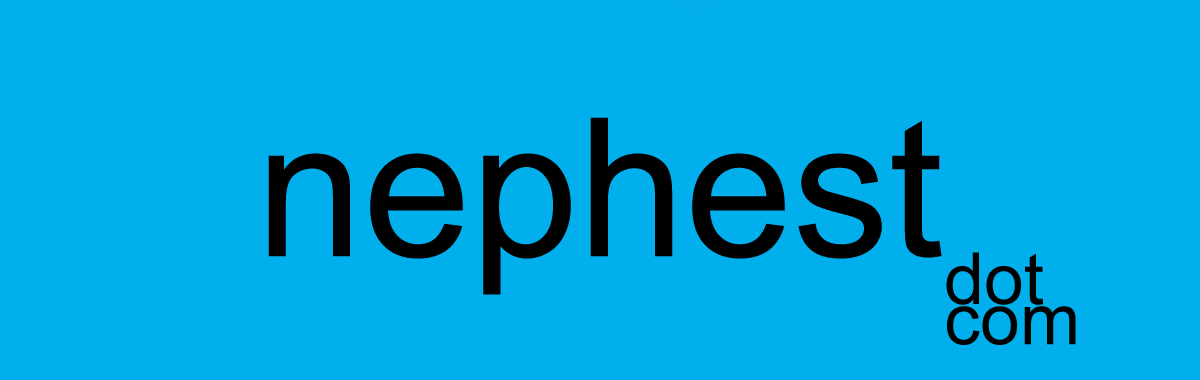
<style>
.page{position:relative;width:1200px;height:380px;background:#00afeb}
.page>*{position:absolute;margin:0}
.t1{font:193px "ArialMT";color:#000000}
.t2{font:72px/40.1px "ArialMT";color:#000000}
</style>
<div class="page">
<p class="t1" style="left:268px;top:117px;width:674px;height:178px">nephest</p>
<p class="t2" style="left:946px;top:252px;width:130px;height:93px">dot<br>com</p>
</div>
